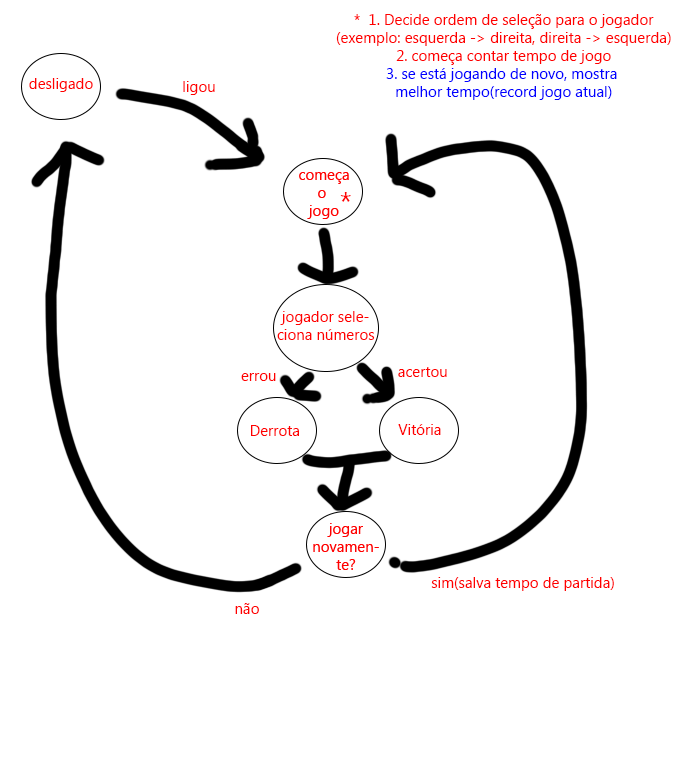
<style>
.page{position:relative;width:676px;height:783px;background:#ffffff}
.page>*{position:absolute;margin:0}
.t1{font:15px "MicrosoftTaiLe";color:#ff0000}
.t2{font:15px "MicrosoftTaiLe";color:#0000ff}
.t3{font:30px "MicrosoftTaiLe";color:#ff0000}
</style>
<div class="page">
<p class="t1" style="left:336px;top:14px;width:335px;height:86px;text-align:center">*  1. Decide ordem de seleção para o jogador<br>(exemplo: esquerda -&gt; direita, direita -&gt; esquerda)<br>2. começa contar tempo de jogo<br><span class="t2">3. se está jogando de novo, mostra <br>melhor tempo(record jogo atual)</span></p>
<p class="t1" style="left:29px;top:78px;width:64px;height:14px">desligado</p>
<p class="t1" style="left:183px;top:81px;width:32px;height:14px">ligou</p>
<p class="t3" style="left:340px;top:192px;width:11px;height:10px">*</p>
<p class="t1" style="left:277px;top:311px;width:98px;height:29px;text-align:center">jogador seleciona números</p>
<p class="t1" style="left:241px;top:373px;width:35px;height:8px">errou</p>
<p class="t1" style="left:398px;top:367px;width:49px;height:10px">acertou</p>
<p class="t1" style="left:251px;top:425px;width:48px;height:11px">Derrota</p>
<p class="t1" style="left:398px;top:424px;width:43px;height:11px">Vitória</p>
<p class="t1" style="left:431px;top:577px;width:183px;height:14px">sim(salva tempo de partida)</p>
<p class="t1" style="left:235px;top:603px;width:24px;height:11px">não</p>
</div>
